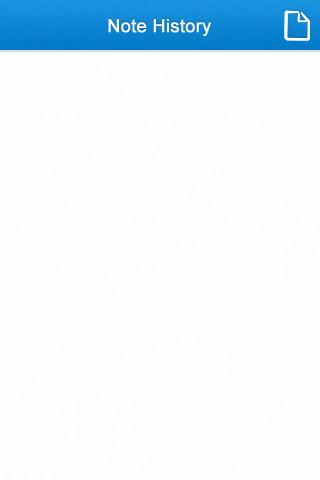
<style>
.page{position:relative;width:320px;height:480px}
.page>*{position:absolute;margin:0}
.t1{font:18px "ArialMT";letter-spacing:0.025em;color:#ffffff;font-weight:bold}
</style>
<div class="page">
<p class="t1" style="left:108px;top:19px;width:103px;height:17px">Note History</p>
</div>
